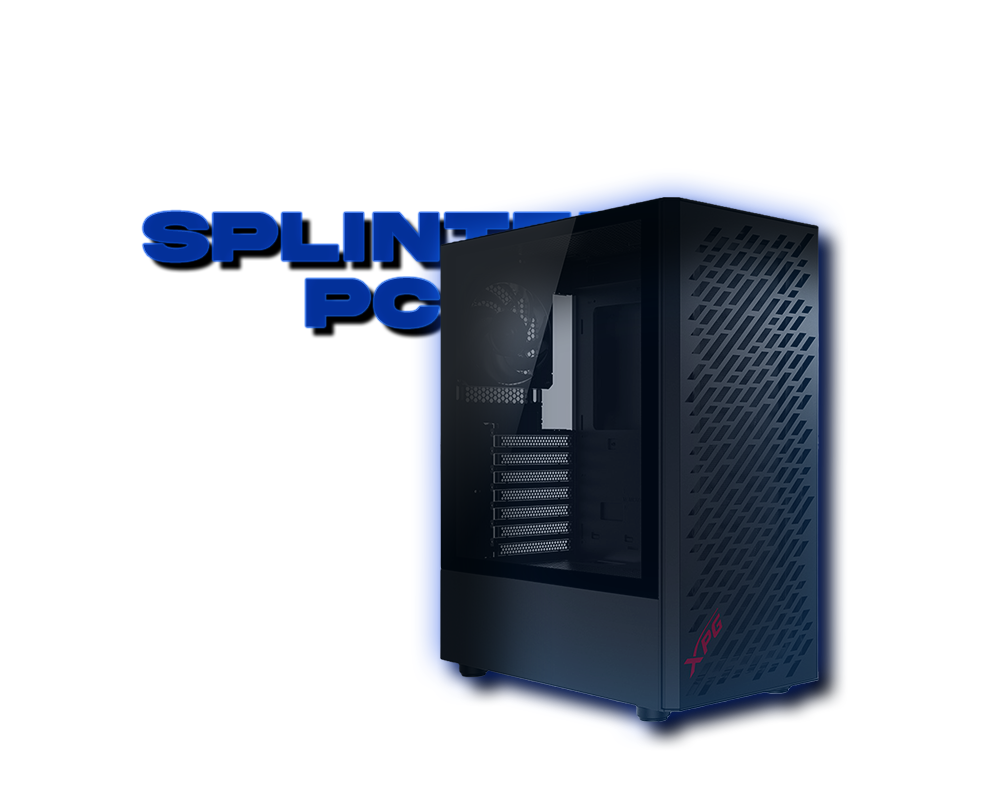
<style>
.page{position:relative;width:1000px;height:800px;background:#ffffff}
.page>*{position:absolute;margin:0}
.t1{font:72px "AkiraExpanded-SuperBold";letter-spacing:0.01em}
.t2{font:72px "AkiraExpanded-SuperBold";letter-spacing:0.01em;color:#03309a}
</style>
<div class="page">
<p class="t1" style="left:143px;top:211px;width:501px;height:51px">SPLINTER</p>
<p class="t2" style="left:306px;top:278px;width:133px;height:50px">pc</p>
</div>
